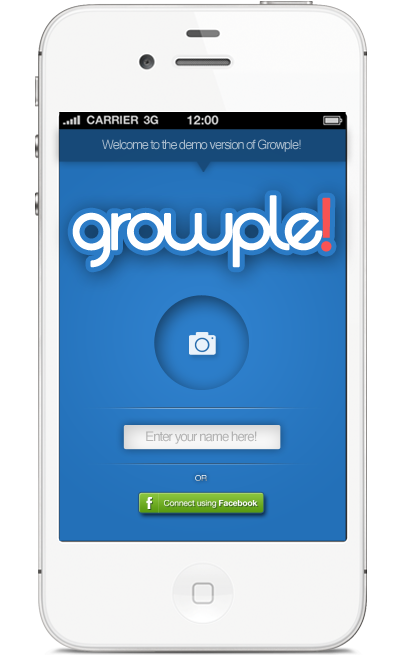
<style>
.page{position:relative;width:406px;height:655px;background:#ffffff}
.page>*{position:absolute;margin:0}
.t1{font:12.7px "Helvetica";letter-spacing:-0.075em;color:#a9bccd}
.t2{font:70.6px "Quadranta";letter-spacing:-0.075em;color:#ffffff;font-weight:bold}
.t3{font:70.6px "Quadranta";letter-spacing:-0.075em;color:#f85353;font-weight:bold}
.t4{font:13.2px "Helvetica";letter-spacing:-0.075em;color:#b4b4b4}
.t5{font:8.3px "Helvetica";letter-spacing:-0.075em}
.t6{font:8.4px "HelveticaNeueLT-Roman";letter-spacing:-0.015em;color:#ffffff}
.t7{font:8.4px "HelveticaNeueLT-Bold";letter-spacing:-0.015em;color:#ffffff}
</style>
<div class="page">
<p class="t1" style="left:102px;top:139px;width:199px;height:13px">Welcome to the demo version of Growple!</p>
<p class="t2" style="left:72px;top:195px;width:260px;height:73px">growple<span class="t3">!</span></p>
<p class="t4" style="left:146px;top:431px;width:111px;height:13px">Enter your name here!</p>
<p class="t5" style="left:195px;top:475px;width:12px;height:6px">OR</p>
<p class="t6" style="left:164px;top:500px;width:94px;height:8px">Connect using <span class="t7">Facebook</span></p>
</div>
